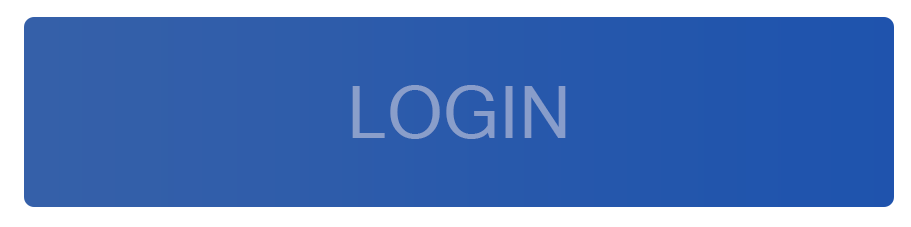
<style>
.page{position:relative;width:911px;height:227px;background:#ffffff}
.page>*{position:absolute;margin:0}
.t1{font:72px "MicrosoftSansSerif";color:#899dca}
</style>
<div class="page">
<p class="t1" style="left:352px;top:85px;width:214px;height:54px">LOGIN</p>
</div>
